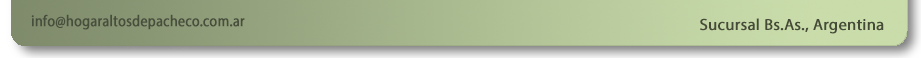
<style>
.page{position:relative;width:921px;height:58px}
.page>*{position:absolute;margin:0}
.t1{font:15.6px "MyriadPro-Regular";letter-spacing:0.01em;color:#474e3c;font-weight:bold;scale:0.88 1}
.t2{font:16px "MyriadPro-Regular";letter-spacing:0.01em;color:#464b37;font-weight:bold}
</style>
<div class="page">
<p class="t1" style="left:31px;top:14px;width:214px;height:16px">info@hogaraltosdepacheco.com.ar</p>
<p class="t2" style="left:700px;top:18px;width:184px;height:16px">Sucursal Bs.As., Argentina</p>
</div>
